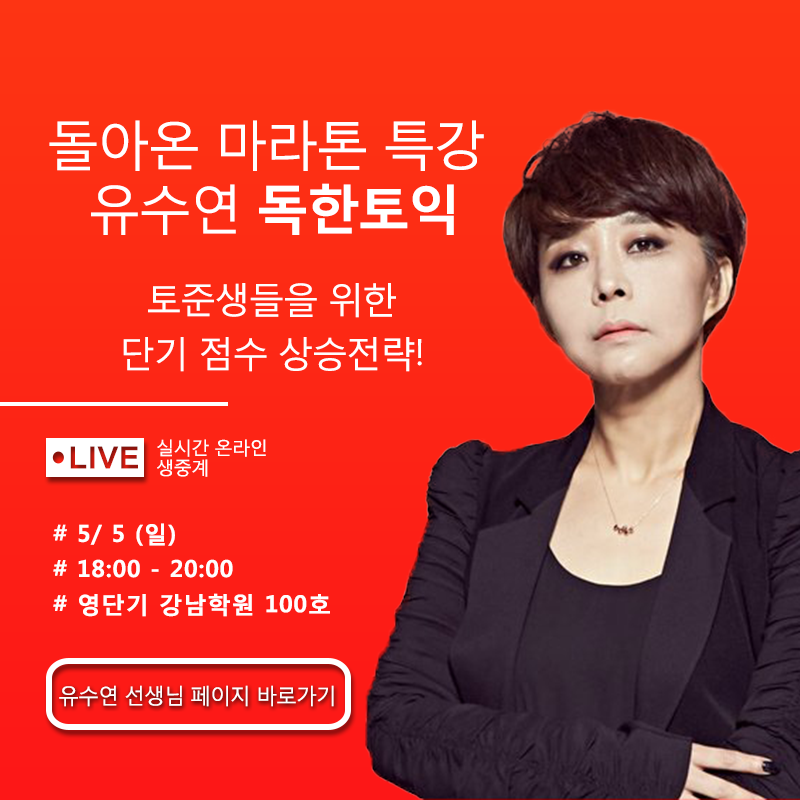
<style>
.page{position:relative;width:800px;height:800px}
.page>*{position:absolute;margin:0}
.t1{font:53.4px "MalgunGothicRegular";letter-spacing:-0.05em;color:#ffffff}
.t2{font:53.4px "MalgunGothicBold";letter-spacing:-0.05em;color:#ffffff}
.t3{font:36px/54px "MalgunGothicRegular";letter-spacing:-0.05em;color:#fefefe}
.t4{font:30.5px "Arial-BoldMT";letter-spacing:0.03em}
.t5{font:18.1px/20px "MalgunGothicRegular";letter-spacing:-0.05em;color:#fefefe}
.t6{font:23.5px/35.2px "MalgunGothicBold";letter-spacing:0.03em;color:#fefefe}
.t7{font:21.3px "MalgunGothicRegular";letter-spacing:-0.05em;color:#fefefe}
</style>
<div class="page">
<p class="t1" style="left:49px;top:120px;width:435px;height:115px;text-align:center">돌아온 마라톤 특강 <br>유수연 <span class="t2">독한토익</span></p>
<p class="t3" style="left:123px;top:283px;width:299px;height:89px;text-align:center">토준생들을 위한<br>단기 점수 상승전략!</p>
<p class="t4" style="left:70px;top:446px;width:68px;height:23px">LIVE</p>
<p class="t5" style="left:157px;top:439px;width:109px;height:38px">실시간 온라인<br>생중계</p>
<p class="t6" style="left:53px;top:523px;width:277px;height:94px"># 5/ 5 (일) <br># 18:00 - 20:00<br># 영단기 강남학원 100호</p>
<p class="t7" style="left:59px;top:685px;width:275px;height:22px">유수연 선생님 페이지 바로가기</p>
</div>
